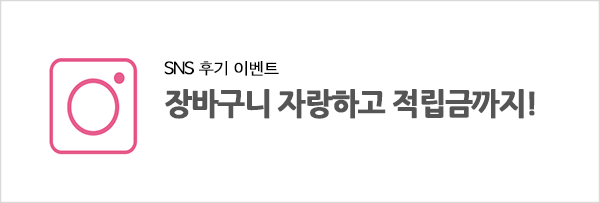
<style>
.page{position:relative;width:600px;height:203px;background:#ffffff}
.page>*{position:absolute;margin:0}
.t1{font:16px "AppleGothic";letter-spacing:-0.06em;color:#000000;font-weight:bold}
.t2{font:30px "NanumGothicExtraBold";letter-spacing:-0.06em;color:#555555;font-weight:bold}
</style>
<div class="page">
<p class="t1" style="left:164px;top:61px;width:115px;height:15px">SNS 후기 이벤트</p>
<p class="t2" style="left:165px;top:89px;width:370px;height:30px">장바구니 자랑하고 적립금까지!</p>
</div>
